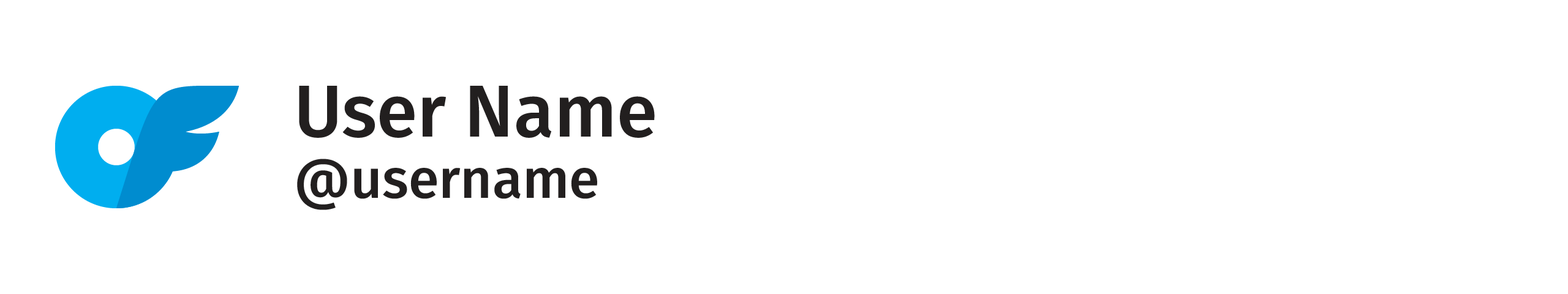
<style>
.page{position:relative;width:1568px;height:294px;background:#ffffff}
.page>*{position:absolute;margin:0}
.t1{font:73.5px "FiraSans-Medium";color:#231f20}
.t2{font:55.1px "FiraSans-Medium";color:#231f20}
</style>
<div class="page">
<p class="t1" style="left:299px;top:86px;width:356px;height:52px">User Name</p>
<p class="t2" style="left:297px;top:159px;width:300px;height:51px">@username</p>
</div>
